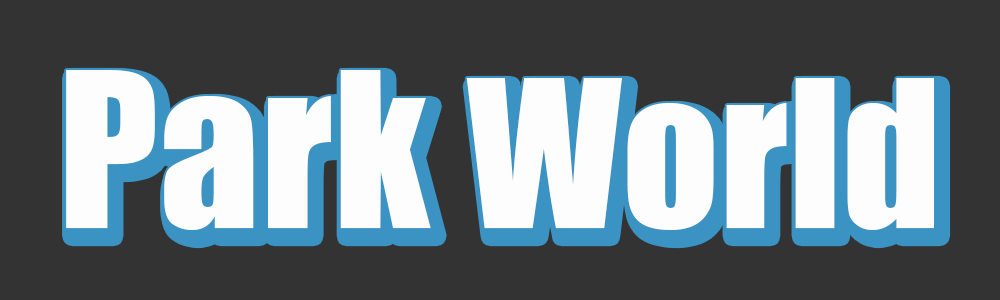
<style>
.page{position:relative;width:1000px;height:300px;background:#333333}
.page>*{position:absolute;margin:0}
.t1{font:190px "Impact";letter-spacing:0.005em;color:#fdfdfd}
.t2{font:200px "Impact";letter-spacing:0.005em;color:#fdfdfd}
</style>
<div class="page">
<p class="t1" style="left:66px;top:70px;width:868px;height:160px"><span class="t2">Park </span>World</p>
</div>
